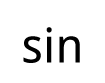
<style>
.page{position:relative;width:105px;height:83px;background:#ffffff}
.page>*{position:absolute;margin:0}
.t1{font:47.9px "DroidSans";color:#000000}
</style>
<div class="page">
<p class="t1" style="left:23px;top:27px;width:57px;height:36px">sin</p>
</div>
